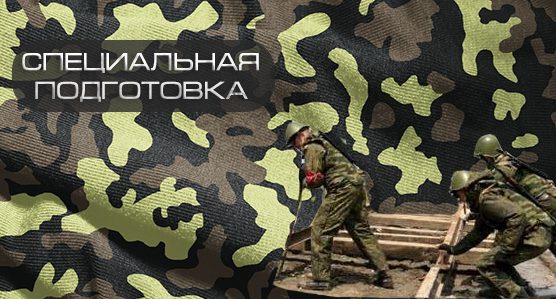
<style>
.page{position:relative;width:556px;height:299px}
.page>*{position:absolute;margin:0}
.t1{font:24px "MicraDi";letter-spacing:-0.025em}
</style>
<div class="page">
<p class="t1" style="left:22px;top:53px;width:237px;height:49px;text-align:center">СПЕЦИАЛЬНАЯ ПОДГОТОВКА</p>
</div>
